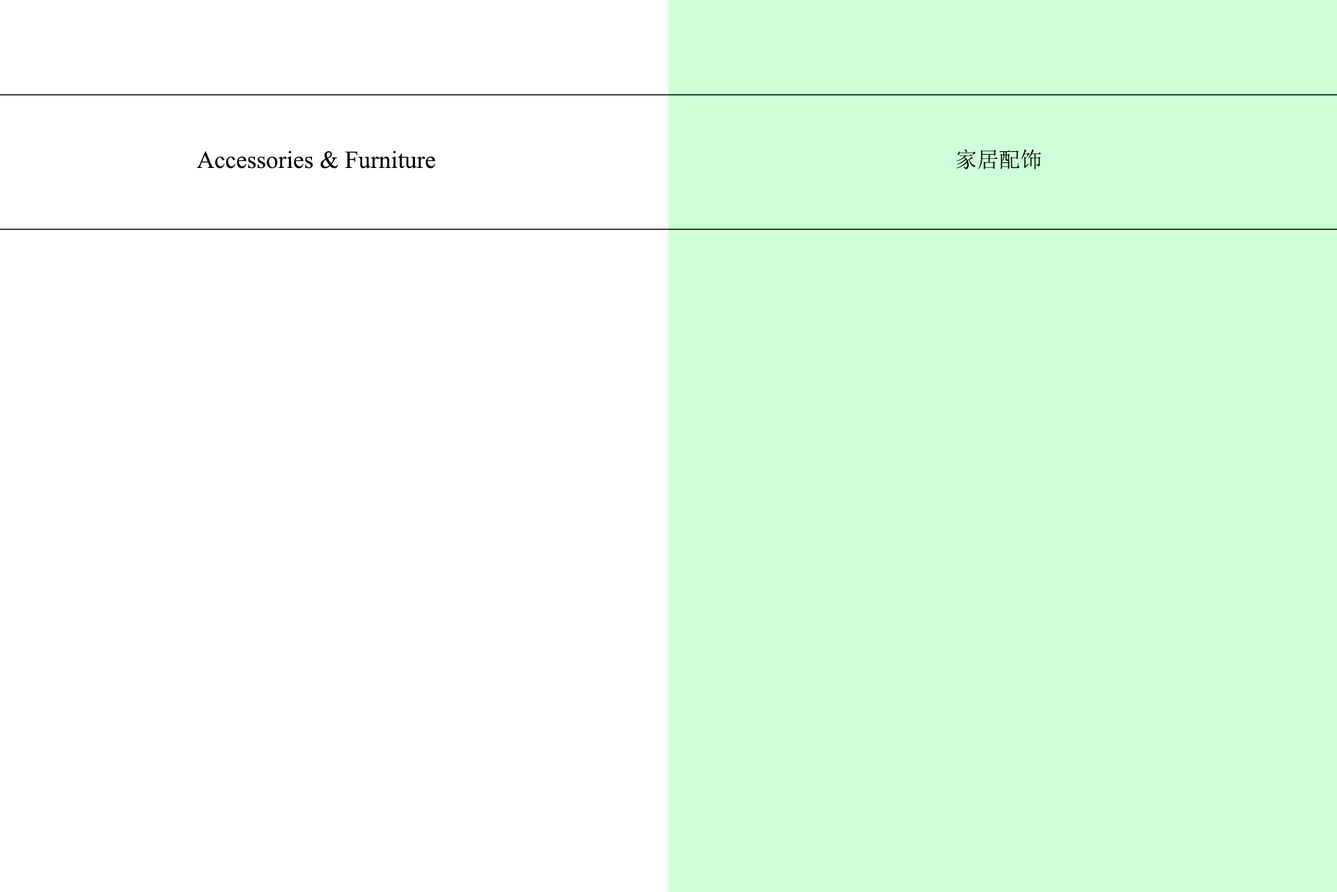
<style>
.page{position:relative;width:1337px;height:892px;background:#ceffd7}
.page>*{position:absolute;margin:0}
.t1{font:21.7px "SimSun";color:#000000}
.t2{font:24.5px "TimesNewRomanPSMT";color:#000000}
</style>
<div class="page">
<p class="t1" style="left:956px;top:149px;width:86px;height:20px">家居配饰</p>
<p class="t2" style="left:196px;top:150px;width:239px;height:19px">Accessories &amp; Furniture</p>
</div>
